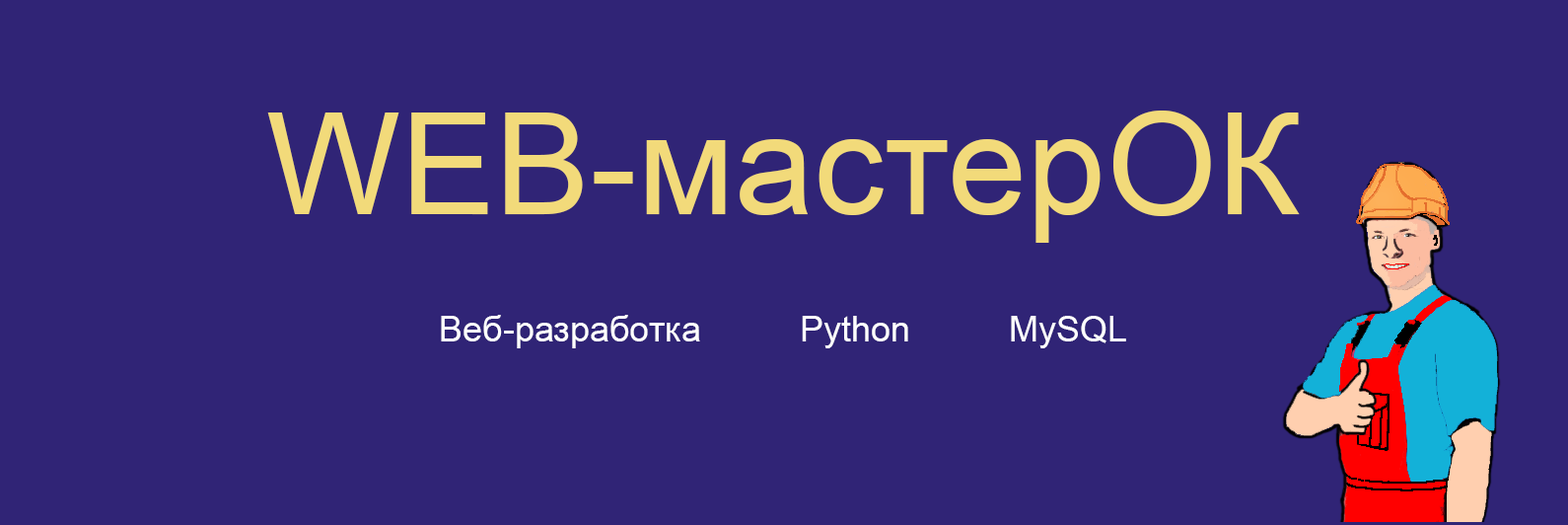
<style>
.page{position:relative;width:1568px;height:525px;background:#302476}
.page>*{position:absolute;margin:0}
.t1{font:142px "ArialMT";color:#f2da7a}
.t2{font:35.5px "ArialMT";color:#ffffff}
</style>
<div class="page">
<p class="t1" style="left:267px;top:110px;width:1033px;height:133px">WEB-мастерОК</p>
<p class="t2" style="left:441px;top:315px;width:685px;height:33px">Веб-разработка          Python          MySQL</p>
</div>
